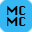
<style>
.page{position:relative;width:32px;height:32px;background:#35b7f3}
.page>*{position:absolute;margin:0}
.t1{font:12px "Silom";color:#000000}
</style>
<div class="page">
<p class="t1" style="left:7px;top:6px;width:19px;height:9px">MC</p>
<p class="t1" style="left:7px;top:17px;width:19px;height:9px">MC</p>
</div>
